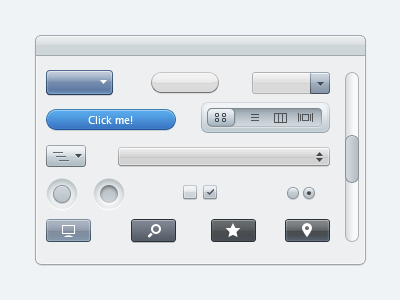
<style>
.page{position:relative;width:400px;height:300px;background:#f0f3f5}
.page>*{position:absolute;margin:0}
.t1{font:10px "LucidaGrande";color:#ffffff}
</style>
<div class="page">
<p class="t1" style="left:88px;top:116px;width:45px;height:8px">Click me!</p>
</div>
